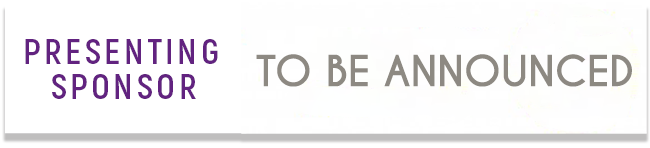
<style>
.page{position:relative;width:650px;height:148px;background:#ffffff}
.page>*{position:absolute;margin:0}
.t1{font:40.2px "CaviarDreams-Bold";color:#8d8982}
</style>
<div class="page">
<p class="t1" style="left:256px;top:54px;width:376px;height:33px">TO BE ANNOUNCED</p>
</div>
